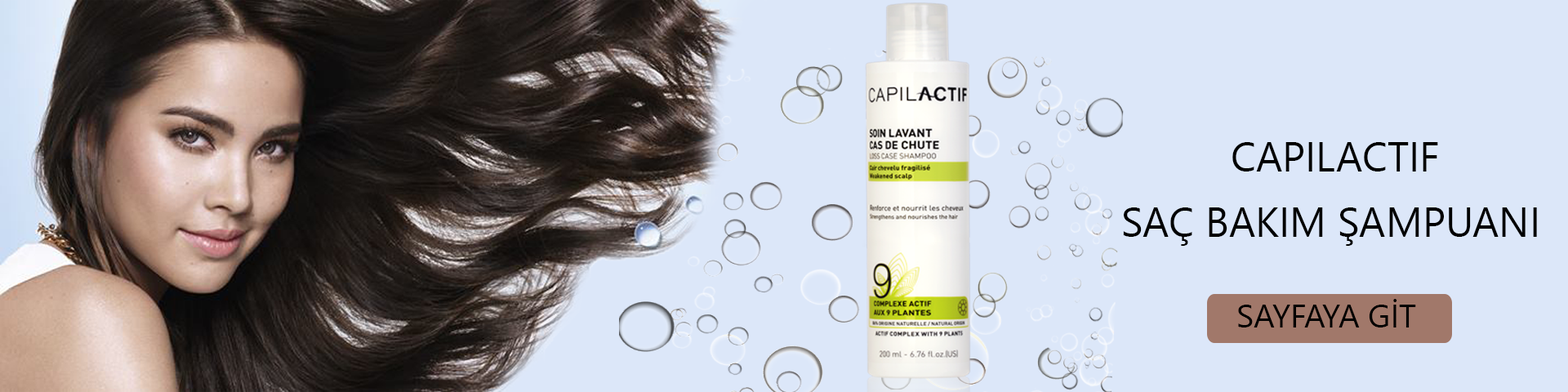
<style>
.page{position:relative;width:1568px;height:392px;background:#dce7f9}
.page>*{position:absolute;margin:0}
.t1{font:40.8px "SegoeUI";color:#000000}
.t2{font:40.8px "SegoeUI";color:#000000;text-transform:uppercase}
.t3{font:32.7px "SegoeUI";color:#000000}
</style>
<div class="page">
<p class="t1" style="left:1232px;top:142px;width:206px;height:30px">CAPILACTIF</p>
<p class="t2" style="left:1123px;top:207px;width:414px;height:39px">SAÇ BAKIM ŞAMPUANI</p>
<p class="t3" style="left:1238px;top:299px;width:178px;height:28px">SAYFAYA GİT</p>
</div>
